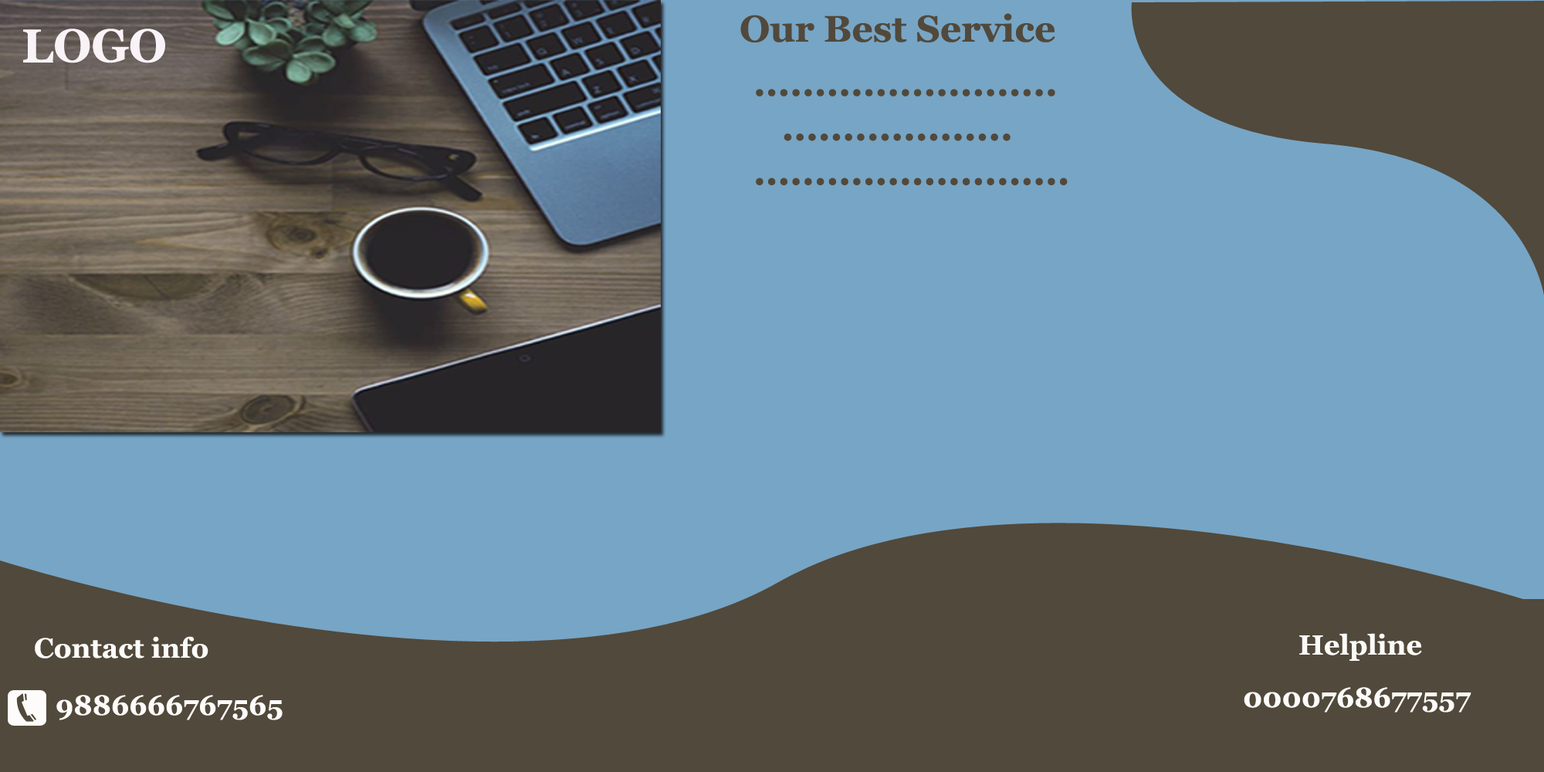
<style>
.page{position:relative;width:1544px;height:772px;background:#77a5c5}
.page>*{position:absolute;margin:0}
.t1{font:37.1px "Georgia-Bold";color:#51493b}
.t2{font:46.3px "Georgia-Bold";color:#f9f3f8}
.t3{font:27.8px "Georgia-Bold";color:#fdfcfa}
</style>
<div class="page">
<p class="t1" style="left:740px;top:13px;width:316px;height:29px">Our Best Service</p>
<p class="t2" style="left:23px;top:29px;width:142px;height:34px">LOGO</p>
<p class="t1" style="left:756px;top:89px;width:312px;height:96px">.........................<br>   ...................<br>..........................</p>
<p class="t3" style="left:35px;top:636px;width:173px;height:23px">Contact info</p>
<p class="t3" style="left:1300px;top:633px;width:122px;height:28px">Helpline</p>
<p class="t3" style="left:1244px;top:687px;width:228px;height:26px">0000768677557</p>
<p class="t3" style="left:56px;top:695px;width:227px;height:25px">9886666767565</p>
</div>
